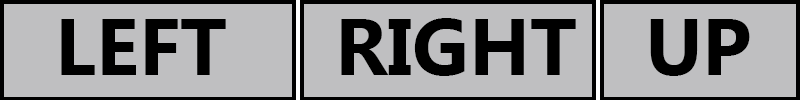
<style>
.page{position:relative;width:800px;height:100px;background:#bfbfc1}
.page>*{position:absolute;margin:0}
.t1{font:80px "MicrosoftTaiLe-Bold";color:#000000}
</style>
<div class="page">
<p class="t1" style="left:61px;top:19px;width:165px;height:56px">LEFT</p>
<p class="t1" style="left:341px;top:18px;width:235px;height:58px">RIGHT</p>
<p class="t1" style="left:650px;top:19px;width:100px;height:57px">UP</p>
</div>
